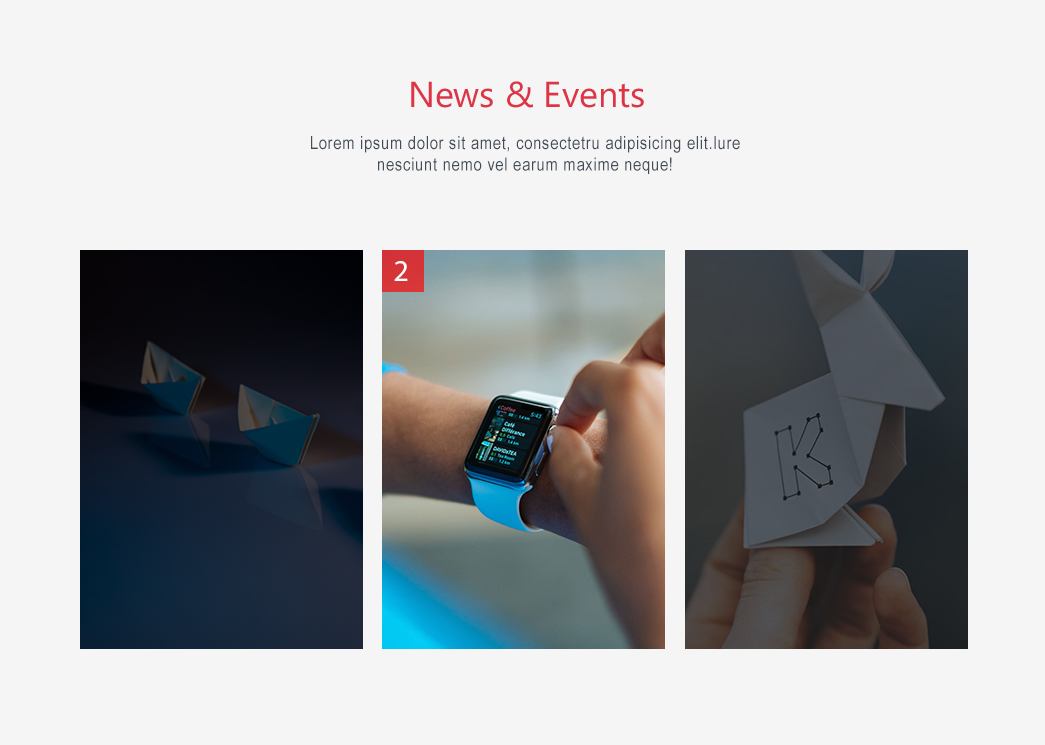
<style>
.page{position:relative;width:1045px;height:745px;background:#f6f5f5}
.page>*{position:absolute;margin:0}
.t1{font:36.1px "KhmerUI";color:#dc3545}
.t2{font:18px "ArialNarrow";letter-spacing:0.04em;color:#424d59}
.t3{font:30px "MyriadPro-Regular";color:#ffffff}
</style>
<div class="page">
<p class="t1" style="left:411px;top:81px;width:233px;height:27px">News &amp; Events</p>
<p class="t2" style="left:311px;top:136px;width:429px;height:38px;text-align:center">Lorem ipsum dolor sit amet, consectetru adipisicing elit.lure<br>nesciunt nemo vel earum maxime neque!</p>
<p class="t3" style="left:394px;top:261px;width:14px;height:20px">2</p>
</div>
